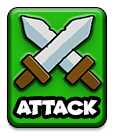
<style>
.page{position:relative;width:114px;height:136px;background:#ffffff}
.page>*{position:absolute;margin:0}
.t1{font:21.1px "Funhouse";color:#ffffff}
</style>
<div class="page">
<p class="t1" style="left:16px;top:99px;width:82px;height:17px">ATTACK</p>
</div>
